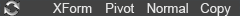
<style>
.page{position:relative;width:240px;height:16px;background:#424242}
.page>*{position:absolute;margin:0}
.t1{font:13px "ArialMT";color:#e5e5e5}
</style>
<div class="page">
<p class="t1" style="left:53px;top:3px;width:39px;height:10px">XForm</p>
<p class="t1" style="left:106px;top:3px;width:29px;height:10px">Pivot</p>
<p class="t1" style="left:147px;top:3px;width:41px;height:10px">Normal</p>
<p class="t1" style="left:200px;top:3px;width:31px;height:13px">Copy</p>
</div>
